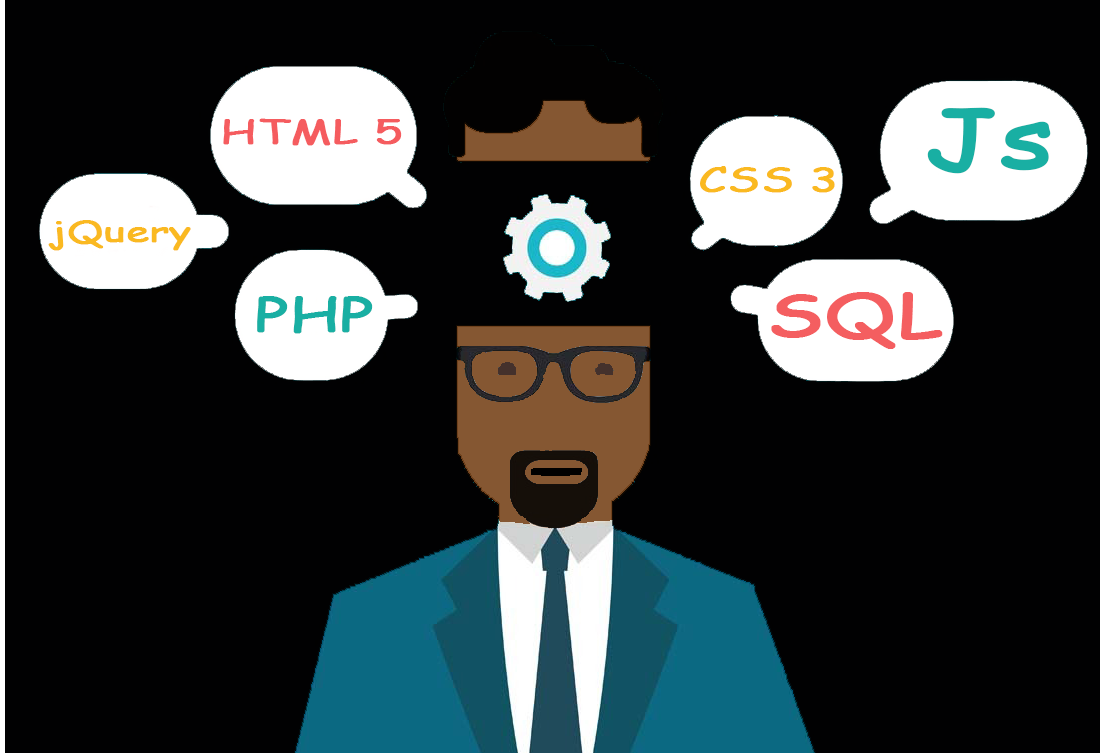
<style>
.page{position:relative;width:1100px;height:753px;background:#010102}
.page>*{position:absolute;margin:0}
.t1{font:79.2px "ComicSansMS";color:#19afa3;font-weight:bold;scale:1.39 1}
.t2{font:33.3px "ComicSansMS";color:#f55c5f;font-weight:bold;scale:1.39 1}
.t3{font:33.3px "ComicSansMS";color:#fab921;font-weight:bold;scale:1.39 1}
.t4{font:29.2px "ComicSansMS";color:#fab921;font-weight:bold;scale:1.39 1}
.t5{font:58.3px "ComicSansMS";color:#f45e60;font-weight:bold;scale:1.39 1}
.t6{font:45.8px "ComicSansMS";color:#19afa3;font-weight:bold;scale:1.39 1}
</style>
<div class="page">
<p class="t1" style="left:927px;top:107px;width:124px;height:67px">Js</p>
<p class="t2" style="left:223px;top:118px;width:179px;height:28px">HTML 5</p>
<p class="t3" style="left:700px;top:166px;width:135px;height:27px">CSS 3</p>
<p class="t4" style="left:48px;top:220px;width:143px;height:31px">jQuery</p>
<p class="t5" style="left:771px;top:292px;width:172px;height:57px">SQL</p>
<p class="t6" style="left:257px;top:296px;width:116px;height:38px">PHP</p>
</div>
